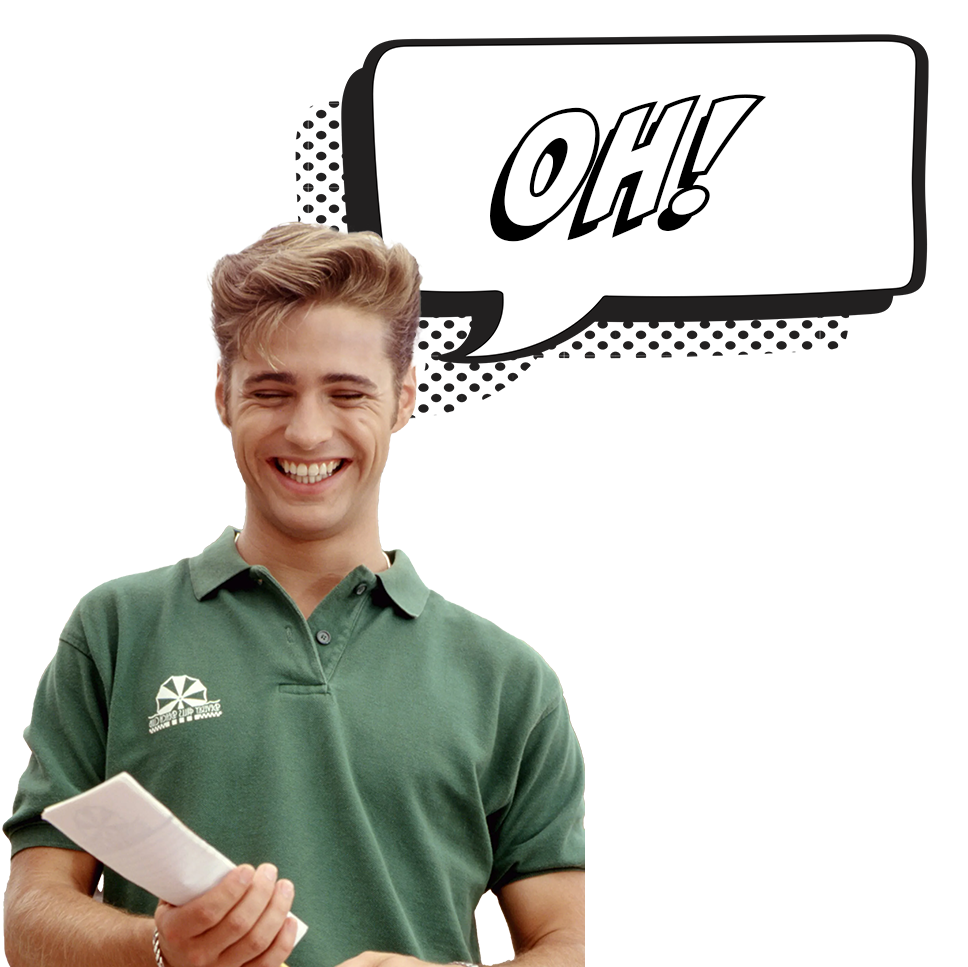
<style>
.page{position:relative;width:968px;height:967px;background:#ffffff}
.page>*{position:absolute;margin:0}
.t1{font:140.6px "CCBiffBamBoomOutline";color:#000000}
</style>
<div class="page">
<p class="t1" style="left:490px;top:94px;width:277px;height:148px;rotate:-4deg">OH!</p>
</div>
